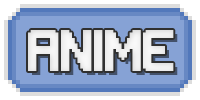
<style>
.page{position:relative;width:200px;height:100px;background:#86a2d5}
.page>*{position:absolute;margin:0}
.t1{font:44px "Gameplay";color:#f9f9f9}
</style>
<div class="page">
<p class="t1" style="left:28px;top:30px;width:146px;height:41px">ANIME</p>
</div>
